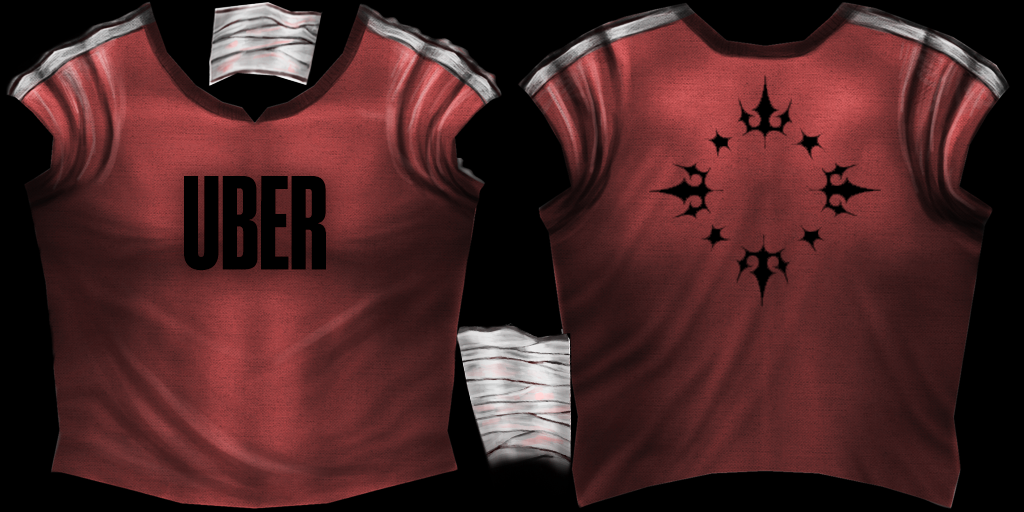
<style>
.page{position:relative;width:1024px;height:512px;background:#000000}
.page>*{position:absolute;margin:0}
.t1{font:140.4px "Coolvetica-HeavyComp";color:#000000;text-transform:uppercase}
</style>
<div class="page">
<p class="t1" style="left:184px;top:176px;width:142px;height:95px">UBER</p>
</div>
